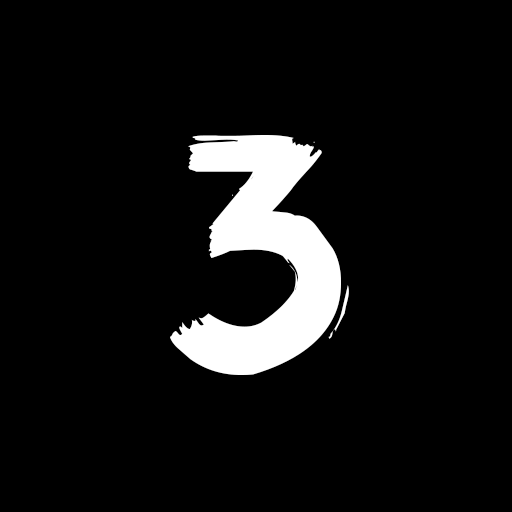
<style>
.page{position:relative;width:512px;height:512px;background:#000000}
.page>*{position:absolute;margin:0}
.t1{font:300px "appopaint-Regular";color:#ffffff}
</style>
<div class="page">
<p class="t1" style="left:170px;top:135px;width:179px;height:240px">3</p>
</div>
